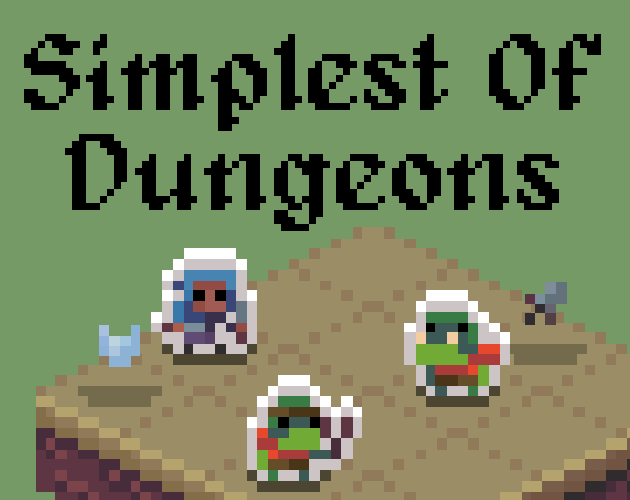
<style>
.page{position:relative;width:630px;height:500px;background:#759a65}
.page>*{position:absolute;margin:0}
.t1{font:111.1px/100px "Alagard";color:#000000}
</style>
<div class="page">
<p class="t1" style="left:24px;top:34px;width:577px;height:197px;text-align:center">Simplest Of Dungeons</p>
</div>
